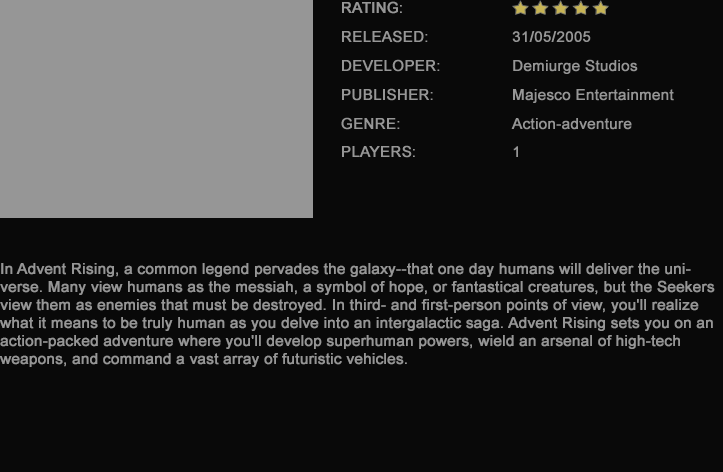
<style>
.page{position:relative;width:723px;height:472px;background:#090909}
.page>*{position:absolute;margin:0}
.t1{font:15px "ArialMT";color:#969696;font-weight:bold}
</style>
<div class="page">
<p class="t1" style="left:342px;top:1px;width:60px;height:13px">RATING:</p>
<p class="t1" style="left:342px;top:30px;width:86px;height:13px">RELEASED:</p>
<p class="t1" style="left:512px;top:31px;width:79px;height:11px">31/05/2005</p>
<p class="t1" style="left:342px;top:59px;width:98px;height:13px">DEVELOPER:</p>
<p class="t1" style="left:513px;top:59px;width:125px;height:15px">Demiurge Studios</p>
<p class="t1" style="left:342px;top:88px;width:91px;height:13px">PUBLISHER:</p>
<p class="t1" style="left:513px;top:89px;width:161px;height:14px">Majesco Entertainment</p>
<p class="t1" style="left:341px;top:117px;width:59px;height:13px">GENRE:</p>
<p class="t1" style="left:511px;top:118px;width:121px;height:12px">Action-adventure</p>
<p class="t1" style="left:342px;top:145px;width:73px;height:13px">PLAYERS:</p>
<p class="t1" style="left:513px;top:146px;width:5px;height:11px">1</p>
<p class="t1" style="left:0px;top:263px;width:715px;height:104px">In Advent Rising, a common legend pervades the galaxy--that one day humans will deliver the universe. Many view humans as the messiah, a symbol of hope, or fantastical creatures, but the Seekers view them as enemies that must be destroyed. In third- and first-person points of view, you'll realize what it means to be truly human as you delve into an intergalactic saga. Advent Rising sets you on an action-packed adventure where you'll develop superhuman powers, wield an arsenal of high-tech weapons, and command a vast array of futuristic vehicles.</p>
</div>
